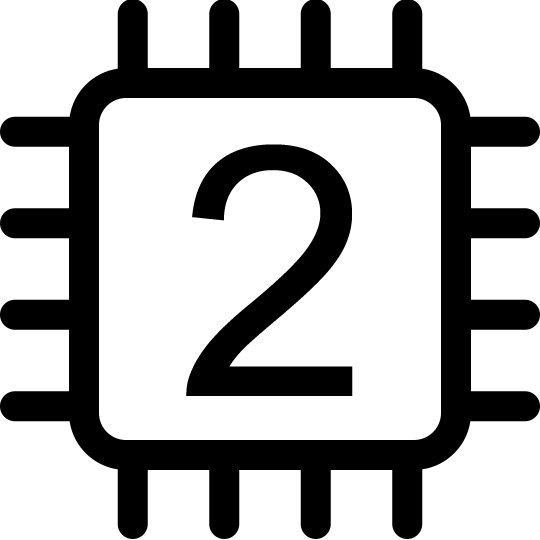
<style>
.page{position:relative;width:540px;height:540px;background:#ffffff}
.page>*{position:absolute;margin:0}
.t1{font:350px "ArialMT";color:#000000}
</style>
<div class="page">
<p class="t1" style="left:186px;top:144px;width:167px;height:252px">2</p>
</div>
